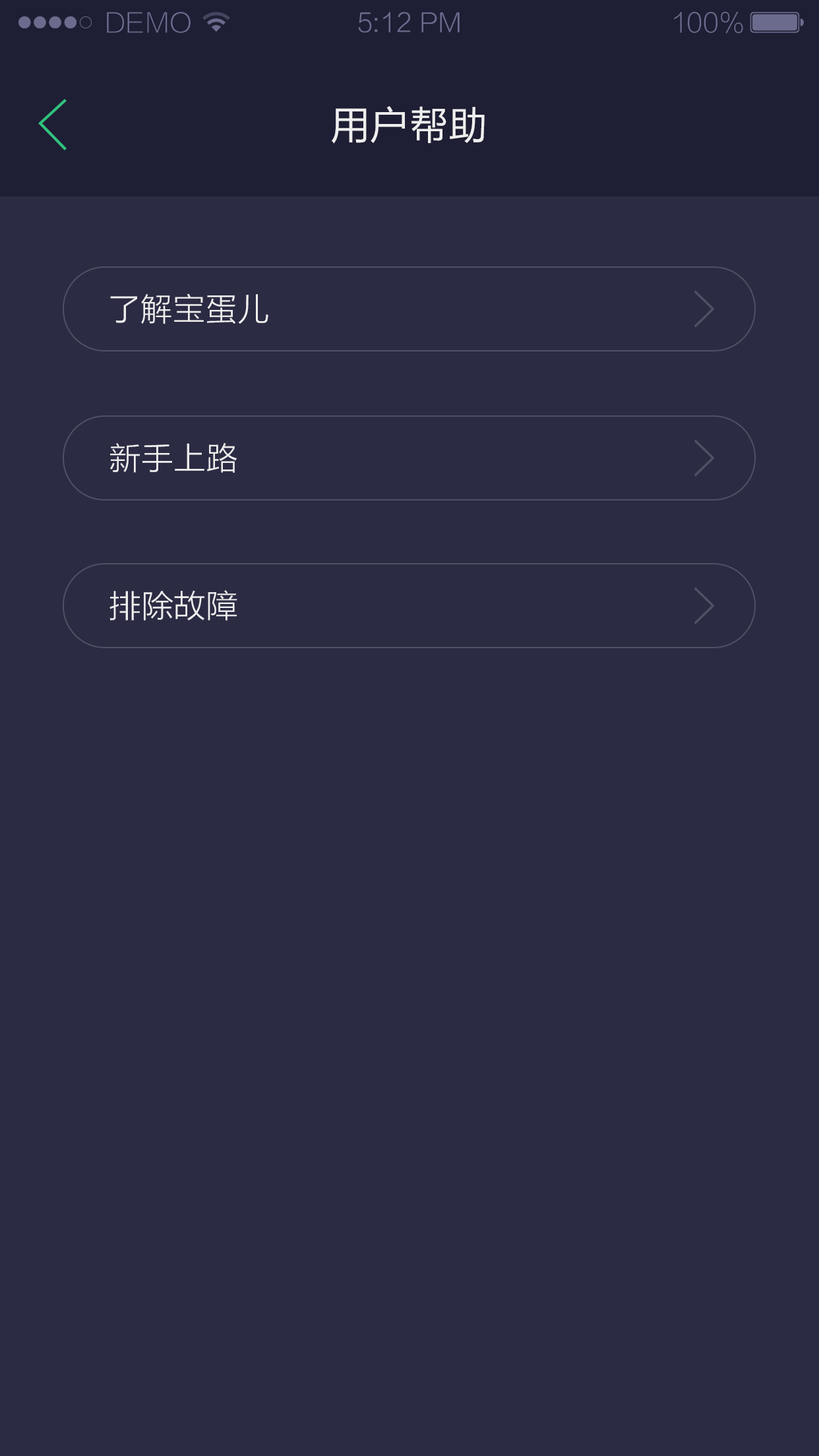
<style>
.page{position:relative;width:819px;height:1456px;background:#2b2b44}
.page>*{position:absolute;margin:0}
.t1{font:26.2px "FZLTXHK--GBK1-0";color:#6b6b8d;text-transform:uppercase}
.t2{font:26.2px "FZLTXHK";color:#6b6b8d}
.t3{font:26.2px "FZLTXHK--GBK1-0";color:#6b6b8d}
.t4{font:39.3px "FZLTHJW--GB1-0";color:#eeeeee;text-transform:uppercase}
.t5{font:32.3px "FZLTXHK";color:#eeeeee}
</style>
<div class="page">
<p class="t1" style="left:107px;top:12px;width:84px;height:21px">demo</p>
<p class="t2" style="left:358px;top:12px;width:102px;height:21px">5:12 PM</p>
<p class="t3" style="left:674px;top:11px;width:69px;height:23px">100%</p>
<p class="t4" style="left:332px;top:106px;width:153px;height:38px">用户帮助</p>
<p class="t5" style="left:110px;top:293px;width:158px;height:31px">了解宝蛋儿</p>
<p class="t5" style="left:110px;top:442px;width:127px;height:31px">新手上路</p>
<p class="t5" style="left:109px;top:590px;width:128px;height:31px">排除故障</p>
</div>
